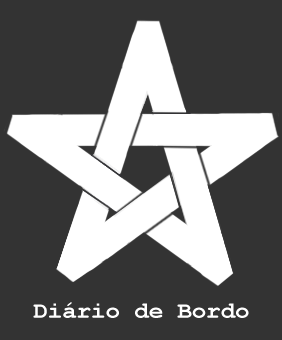
<style>
.page{position:relative;width:282px;height:340px;background:#333333}
.page>*{position:absolute;margin:0}
.t1{font:23.3px "CourierNewPS-BoldMT";color:#ffffff;scale:1.03 1}
</style>
<div class="page">
<p class="t1" style="left:33px;top:302px;width:216px;height:16px">Diário de Bordo</p>
</div>
